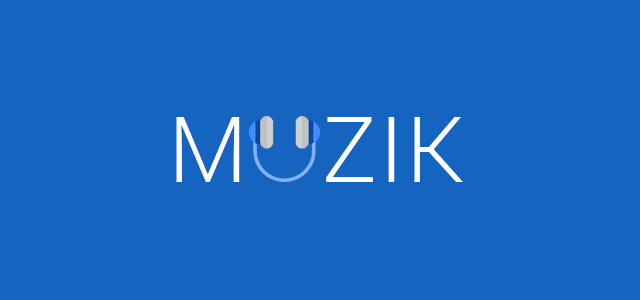
<style>
.page{position:relative;width:640px;height:300px;background:#1565c0}
.page>*{position:absolute;margin:0}
.t1{font:92px "Roboto-Light";letter-spacing:0.02em;color:#ffffff;text-transform:uppercase}
</style>
<div class="page">
<p class="t1" style="left:176px;top:117px;width:287px;height:65px">M   ZIK</p>
</div>
